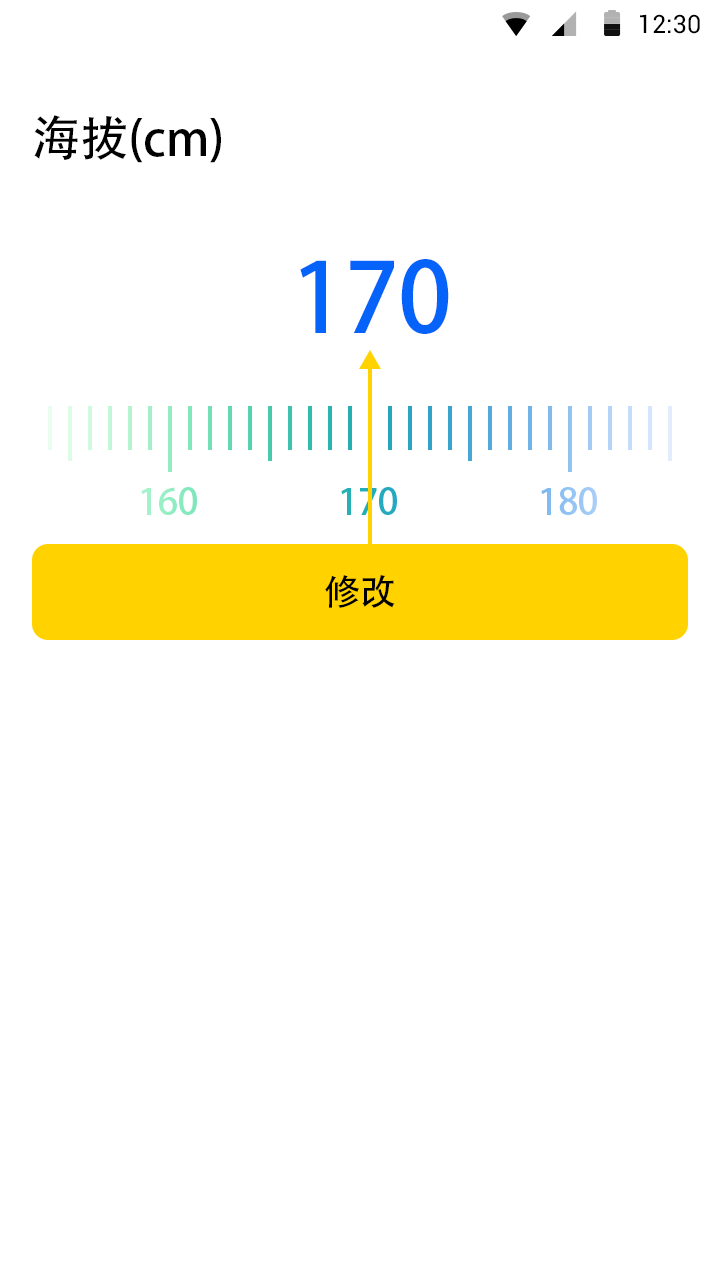
<style>
.page{position:relative;width:720px;height:1280px;background:#ffffff}
.page>*{position:absolute;margin:0}
.t1{font:25.4px "Roboto-Regular";color:#000000}
.t2{font:48px "AdobeHeitiStd-Regular";letter-spacing:-0.004em;color:#000000}
.t3{font:96px "AdobeHeitiStd-Regular";letter-spacing:-0.004em;color:#0663f9}
.t4{font:36px "AdobeHeitiStd-Regular";letter-spacing:-0.004em;color:#91edc2}
.t5{font:36px "AdobeHeitiStd-Regular";letter-spacing:-0.004em;color:#25acbb}
.t6{font:36px "AdobeHeitiStd-Regular";letter-spacing:-0.004em;color:#95c5f3}
.t7{font:36px "AdobeHeitiStd-Regular";letter-spacing:-0.004em;color:#000000}
</style>
<div class="page">
<p class="t1" style="left:640px;top:14px;width:60px;height:20px">12:30</p>
<p class="t2" style="left:34px;top:115px;width:187px;height:48px">海拔(cm)</p>
<p class="t3" style="left:300px;top:259px;width:149px;height:75px">170</p>
<p class="t4" style="left:141px;top:487px;width:56px;height:28px">160</p>
<p class="t5" style="left:341px;top:487px;width:56px;height:28px">170</p>
<p class="t6" style="left:541px;top:487px;width:56px;height:28px">180</p>
<p class="t7" style="left:325px;top:575px;width:70px;height:33px">修改</p>
</div>
